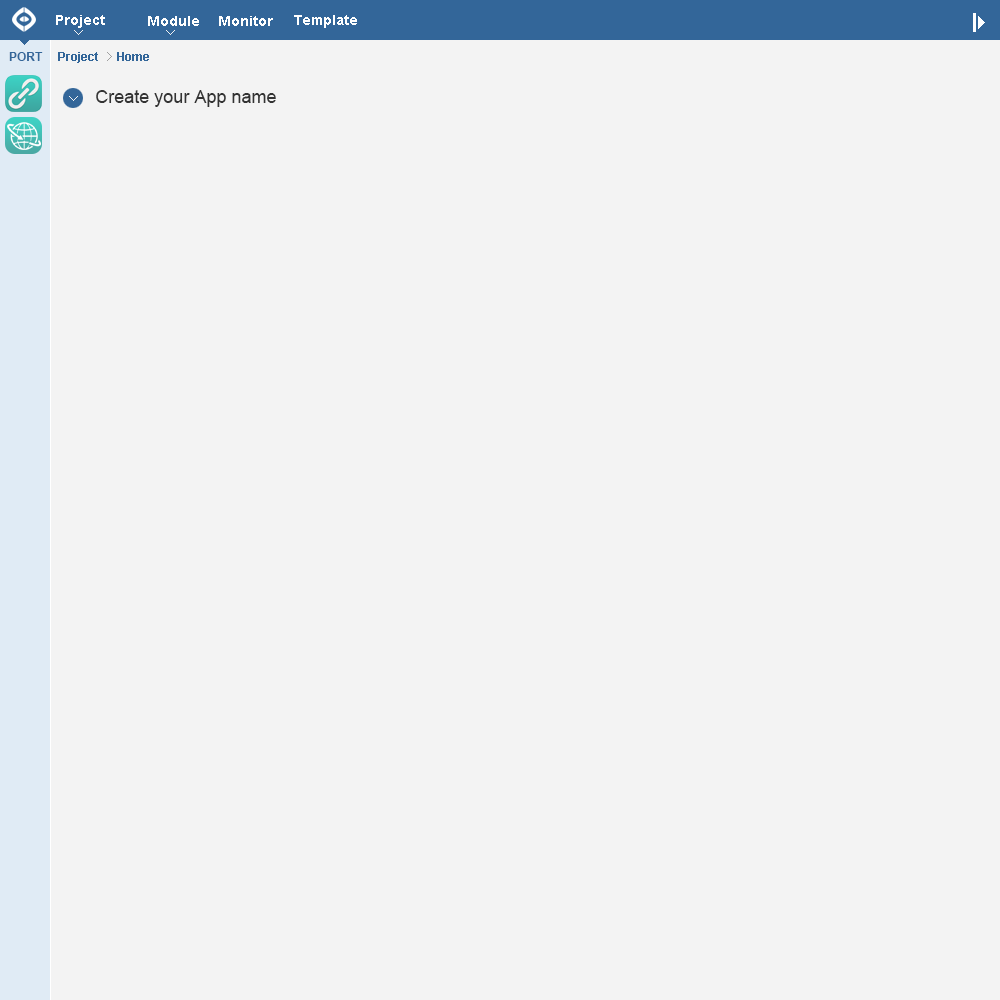
<style>
.page{position:relative;width:1000px;height:1000px;background:#f3f3f3}
.page>*{position:absolute;margin:0}
.t1{font:14px "Arial-BoldMT";color:#ffffff}
.t2{font:12px "Arial-BoldMT";color:#336699}
.t3{font:18px "ArialMT";color:#333333}
</style>
<div class="page">
<p class="t1" style="left:56px;top:15px;width:49px;height:13px">Project</p>
<p class="t1" style="left:148px;top:16px;width:51px;height:10px">Module</p>
<p class="t1" style="left:219px;top:16px;width:54px;height:10px">Monitor</p>
<p class="t1" style="left:294px;top:15px;width:63px;height:13px">Template</p>
<p class="t2" style="left:9px;top:52px;width:34px;height:9px">PORT</p>
<p class="t2" style="left:58px;top:52px;width:40px;height:11px">Project</p>
<p class="t2" style="left:117px;top:52px;width:32px;height:9px">Home</p>
<p class="t3" style="left:96px;top:90px;width:180px;height:17px">Create your App name</p>
</div>
